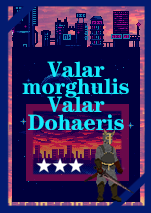
<style>
.page{position:relative;width:151px;height:213px;background:#00003c}
.page>*{position:absolute;margin:0}
.t1{font:21.5px/17.7px "HGBTS_CNKI";color:#14eafd;scale:1.04 1}
</style>
<div class="page">
<p class="t1" style="left:22px;top:61px;width:107px;height:69px;text-align:center">Valar<br>morghulis<br>Valar<br>Dohaeris</p>
</div>
